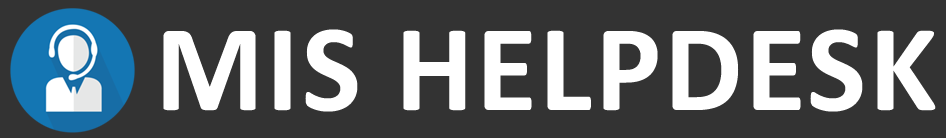
<style>
.page{position:relative;width:946px;height:138px;background:#333333}
.page>*{position:absolute;margin:0}
.t1{font:125px "Calibri-Bold";letter-spacing:0.02em;color:#ffffff}
</style>
<div class="page">
<p class="t1" style="left:163px;top:29px;width:773px;height:83px">MIS HELPDESK</p>
</div>
